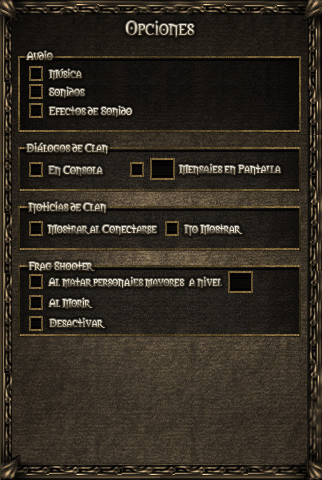
<style>
.page{position:relative;width:322px;height:480px}
.page>*{position:absolute;margin:0}
.t1{font:18px "Morpheus"}
.t2{font:11px "Morpheus"}
</style>
<div class="page">
<p class="t1" style="left:125px;top:21px;width:70px;height:17px">Opciones</p>
<p class="t2" style="left:26px;top:51px;width:27px;height:9px">Audio</p>
<p class="t2" style="left:49px;top:69px;width:33px;height:11px">Música</p>
<p class="t2" style="left:49px;top:87px;width:36px;height:11px">Sonidos</p>
<p class="t2" style="left:49px;top:106px;width:83px;height:11px">Efectos de Sonido</p>
<p class="t2" style="left:26px;top:143px;width:82px;height:11px">Diálogos de Clan</p>
<p class="t2" style="left:48px;top:166px;width:55px;height:10px">En Consola</p>
<p class="t2" style="left:179px;top:164px;width:102px;height:11px">Mensajes en Pantalla</p>
<p class="t2" style="left:28px;top:202px;width:78px;height:12px">Noticias de Clan</p>
<p class="t2" style="left:48px;top:224px;width:109px;height:11px">Mostrar al Conectarse</p>
<p class="t2" style="left:184px;top:224px;width:59px;height:12px">No Mostrar</p>
<p class="t2" style="left:29px;top:261px;width:66px;height:10px">Frag Shooter</p>
<p class="t2" style="left:48px;top:277px;width:174px;height:11px">Al matar personajes mayores  a nivel</p>
<p class="t2" style="left:48px;top:298px;width:45px;height:11px">Al Morir</p>
<p class="t2" style="left:49px;top:318px;width:56px;height:10px">Desactivar</p>
</div>
